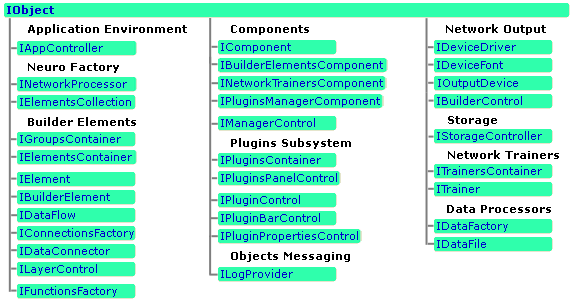
<style>
.page{position:relative;width:575px;height:305px;background:#ffffff}
.page>*{position:absolute;margin:0}
.t1{font:11px "Verdana-Bold";color:#0000cc}
.t2{font:11px "Verdana-Bold";color:#000000}
.t3{font:11px "Verdana";color:#0000cc}
</style>
<div class="page">
<p class="t1" style="left:7px;top:5px;width:47px;height:11px">IObject</p>
<p class="t2" style="left:28px;top:24px;width:159px;height:11px">Application Environment</p>
<p class="t2" style="left:231px;top:25px;width:78px;height:10px">Components</p>
<p class="t2" style="left:446px;top:24px;width:100px;height:11px">Network Output</p>
<p class="t3" style="left:20px;top:43px;width:83px;height:11px">IAppController</p>
<p class="t3" style="left:221px;top:43px;width:70px;height:10px">IComponent</p>
<p class="t3" style="left:437px;top:42px;width:79px;height:9px">IDeviceDriver</p>
<p class="t2" style="left:28px;top:63px;width:91px;height:10px">Neuro Factory</p>
<p class="t3" style="left:221px;top:60px;width:162px;height:11px">IBuilderElementsComponent</p>
<p class="t3" style="left:437px;top:60px;width:66px;height:9px">IDeviceFont</p>
<p class="t3" style="left:221px;top:78px;width:162px;height:11px">INetworkTrainersComponent</p>
<p class="t3" style="left:438px;top:78px;width:80px;height:11px">IOutputDevice</p>
<p class="t3" style="left:20px;top:79px;width:107px;height:9px">INetworkProcessor</p>
<p class="t3" style="left:20px;top:97px;width:111px;height:9px">IElementsCollection</p>
<p class="t3" style="left:221px;top:96px;width:159px;height:11px">IPluginsManagerComponent</p>
<p class="t3" style="left:437px;top:96px;width:85px;height:9px">IBuilderControl</p>
<p class="t2" style="left:28px;top:117px;width:108px;height:9px">Builder Elements</p>
<p class="t3" style="left:221px;top:118px;width:94px;height:11px">IManagerControl</p>
<p class="t2" style="left:448px;top:116px;width:49px;height:10px">Storage</p>
<p class="t3" style="left:20px;top:134px;width:101px;height:11px">IGroupsContainer</p>
<p class="t3" style="left:437px;top:131px;width:105px;height:11px">IStorageController</p>
<p class="t2" style="left:231px;top:138px;width:120px;height:11px">Plugins Subsystem</p>
<p class="t2" style="left:448px;top:150px;width:111px;height:9px">Network Trainers</p>
<p class="t3" style="left:20px;top:152px;width:112px;height:9px">IElementsContainer</p>
<p class="t3" style="left:221px;top:155px;width:100px;height:11px">IPluginsContainer</p>
<p class="t3" style="left:20px;top:174px;width:50px;height:9px">IElement</p>
<p class="t3" style="left:221px;top:173px;width:116px;height:11px">IPluginsPanelControl</p>
<p class="t3" style="left:437px;top:166px;width:105px;height:9px">ITrainersContainer</p>
<p class="t3" style="left:437px;top:184px;width:43px;height:9px">ITrainer</p>
<p class="t3" style="left:20px;top:192px;width:90px;height:9px">IBuilderElement</p>
<p class="t3" style="left:221px;top:195px;width:79px;height:11px">IPluginControl</p>
<p class="t2" style="left:447px;top:205px;width:104px;height:8px">Data Processors</p>
<p class="t3" style="left:20px;top:210px;width:55px;height:9px">IDataFlow</p>
<p class="t3" style="left:221px;top:213px;width:99px;height:11px">IPluginBarControl</p>
<p class="t3" style="left:437px;top:222px;width:71px;height:10px">IDataFactory</p>
<p class="t3" style="left:20px;top:228px;width:114px;height:11px">IConnectionsFactory</p>
<p class="t3" style="left:221px;top:231px;width:137px;height:11px">IPluginPropertiesControl</p>
<p class="t3" style="left:437px;top:239px;width:49px;height:9px">IDataFile</p>
<p class="t3" style="left:20px;top:247px;width:90px;height:8px">IDataConnector</p>
<p class="t2" style="left:231px;top:251px;width:119px;height:11px">Objects Messaging</p>
<p class="t3" style="left:20px;top:264px;width:77px;height:11px">ILayerControl</p>
<p class="t3" style="left:221px;top:269px;width:72px;height:11px">ILogProvider</p>
<p class="t3" style="left:20px;top:286px;width:97px;height:11px">IFunctionsFactory</p>
</div>
